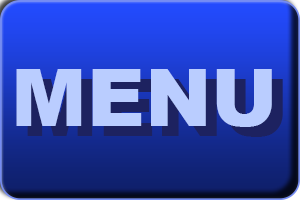
<style>
.page{position:relative;width:300px;height:200px}
.page>*{position:absolute;margin:0}
.t1{font:80px "Arial-Black";color:#bacdff}
.t2{font:80px "Arial-Black"}
</style>
<div class="page">
<p class="t1" style="left:16px;top:69px;width:256px;height:58px">MENU</p>
<p class="t2" style="left:27px;top:79px;width:256px;height:58px">MENU</p>
</div>
